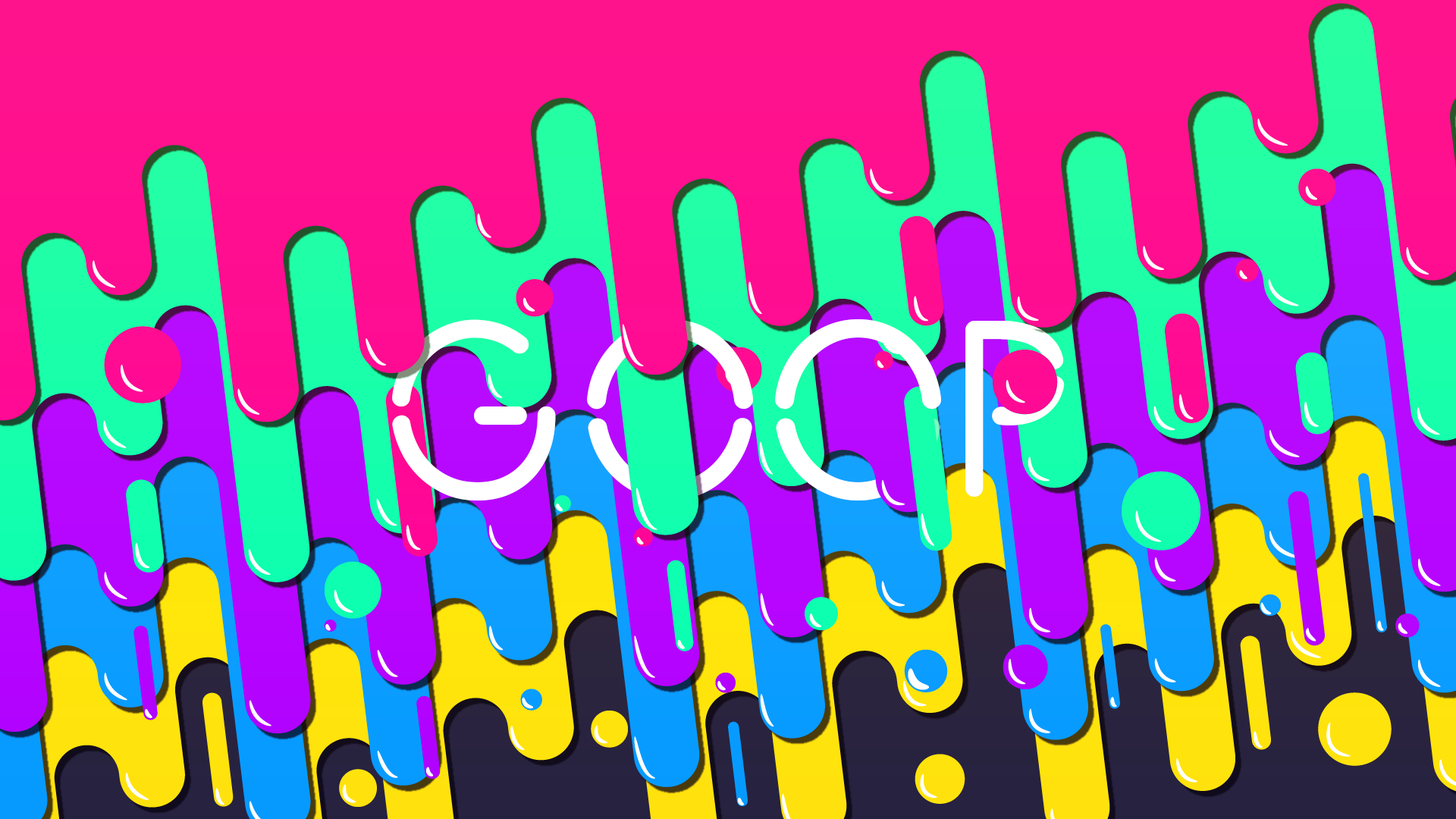
<style>
.page{position:relative;width:1456px;height:819px}
.page>*{position:absolute;margin:0}
.t1{font:242.7px "L-7Stencil";color:#ffffff}
</style>
<div class="page">
<p class="t1" style="left:392px;top:319px;width:673px;height:181px">GOOP</p>
</div>
